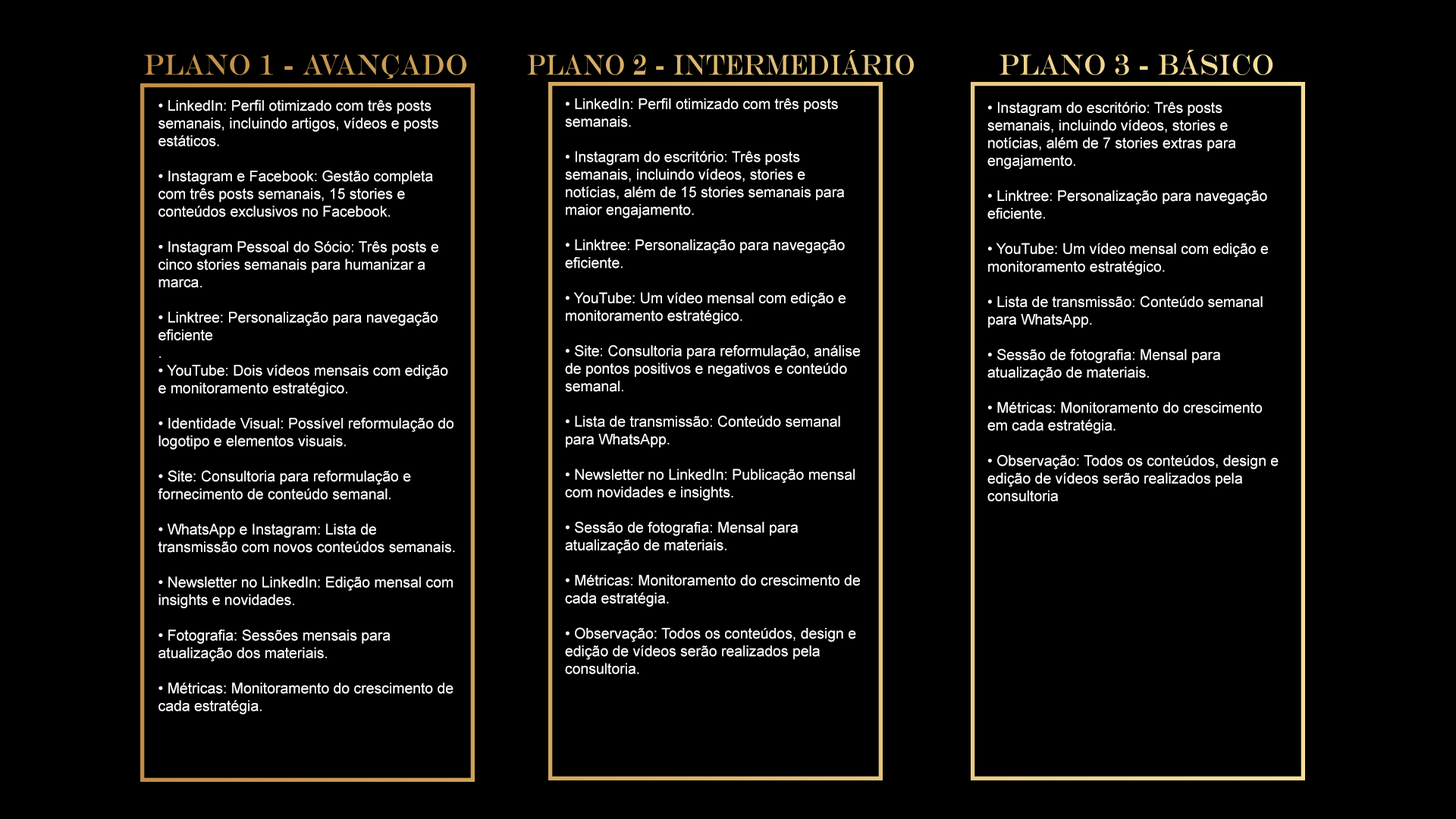
<style>
.page{position:relative;width:1456px;height:819px;background:#000000}
.page>*{position:absolute;margin:0}
.t1{font:14.7px "ArialMT";color:#ffffff}
</style>
<div class="page">
<p class="t1" style="left:158px;top:99px;width:297px;height:615px">• LinkedIn: Perfil otimizado com três posts semanais, incluindo artigos, vídeos e posts estáticos.<br><br>• Instagram e Facebook: Gestão completa com três posts semanais, 15 stories e conteúdos exclusivos no Facebook.<br><br>• Instagram Pessoal do Sócio: Três posts e cinco stories semanais para humanizar a marca.<br><br>• Linktree: Personalização para navegação eficiente<br>.<br>• YouTube: Dois vídeos mensais com edição e monitoramento estratégico.<br><br>• Identidade Visual: Possível reformulação do logotipo e elementos visuais.<br><br>• Site: Consultoria para reformulação e fornecimento de conteúdo semanal.<br><br>• WhatsApp e Instagram: Lista de transmissão com novos conteúdos semanais.<br><br>• Newsletter no LinkedIn: Edição mensal com insights e novidades.<br><br>• Fotografia: Sessões mensais para atualização dos materiais.<br><br>• Métricas: Monitoramento do crescimento de cada estratégia.</p>
<p class="t1" style="left:565px;top:98px;width:295px;height:576px">• LinkedIn: Perfil otimizado com três posts semanais.<br><br>• Instagram do escritório: Três posts semanais, incluindo vídeos, stories e notícias, além de 15 stories semanais para maior engajamento.<br><br>• Linktree: Personalização para navegação eficiente.<br><br>• YouTube: Um vídeo mensal com edição e monitoramento estratégico.<br><br>• Site: Consultoria para reformulação, análise de pontos positivos e negativos e conteúdo semanal.<br><br>• Lista de transmissão: Conteúdo semanal para WhatsApp.<br><br>• Newsletter no LinkedIn: Publicação mensal com novidades e insights.<br><br>• Sessão de fotografia: Mensal para atualização de materiais.<br><br>• Métricas: Monitoramento do crescimento de cada estratégia.<br><br>• Observação: Todos os conteúdos, design e edição de vídeos serão realizados pela consultoria.</p>
<p class="t1" style="left:987px;top:102px;width:292px;height:399px">• Instagram do escritório: Três posts semanais, incluindo vídeos, stories e notícias, além de 7 stories extras para engajamento.<br><br>• Linktree: Personalização para navegação eficiente.<br><br>• YouTube: Um vídeo mensal com edição e monitoramento estratégico.<br><br>• Lista de transmissão: Conteúdo semanal para WhatsApp.<br><br>• Sessão de fotografia: Mensal para atualização de materiais.<br><br>• Métricas: Monitoramento do crescimento em cada estratégia.<br><br>• Observação: Todos os conteúdos, design e edição de vídeos serão realizados pela consultoria</p>
</div>
